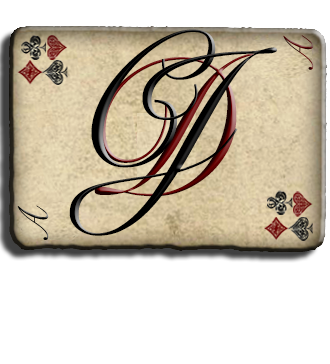
<style>
.page{position:relative;width:330px;height:364px;background:#ffffff}
.page>*{position:absolute;margin:0}
.t1{font:189.1px "SnellRoundhand";color:#000000;scale:0.96 1}
.t2{font:41.1px "SnellRoundhand";scale:0.84 1}
.t3{font:189.3px "SnellRoundhand";color:#000000;scale:0.96 1}
.t4{font:189.3px "SnellRoundhand";scale:0.96 1}
.t5{font:41.8px "SnellRoundhand";scale:0.83 1}
</style>
<div class="page">
<p class="t1" style="left:91px;top:29px;width:125px;height:139px">C</p>
<p class="t2" style="left:283px;top:35px;width:31px;height:35px;rotate:-90deg">A</p>
<p class="t3" style="left:69px;top:47px;width:208px;height:189px">J</p>
<p class="t4" style="left:94px;top:53px;width:160px;height:144px">D</p>
<p class="t5" style="left:17px;top:205px;width:32px;height:35px;rotate:-90deg">A</p>
</div>
